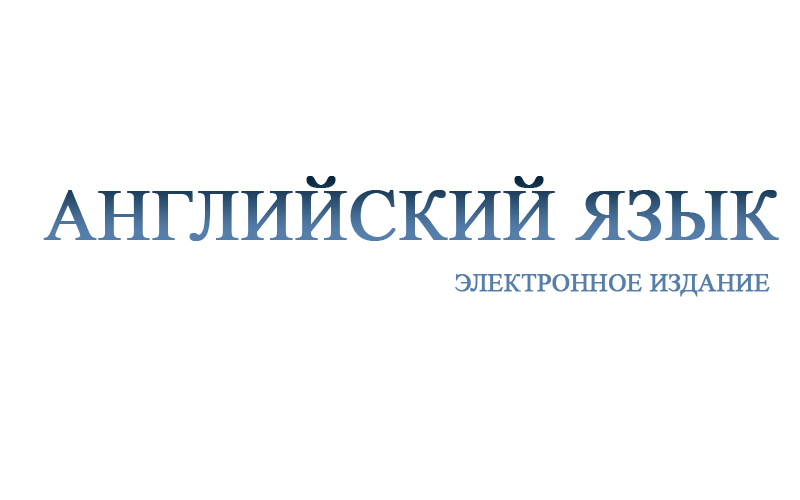
<style>
.page{position:relative;width:800px;height:500px;background:#ffffff}
.page>*{position:absolute;margin:0}
.t1{font:72px "TimesNewRomanPSMT";font-weight:bold}
.t2{font:25px "TimesNewRomanPSMT";color:#557eaa;font-weight:bold}
</style>
<div class="page">
<p class="t1" style="left:43px;top:176px;width:736px;height:65px">АНГЛИЙСКИЙ ЯЗЫК</p>
<p class="t2" style="left:455px;top:274px;width:315px;height:23px">ЭЛЕКТРОННОЕ ИЗДАНИЕ</p>
</div>
